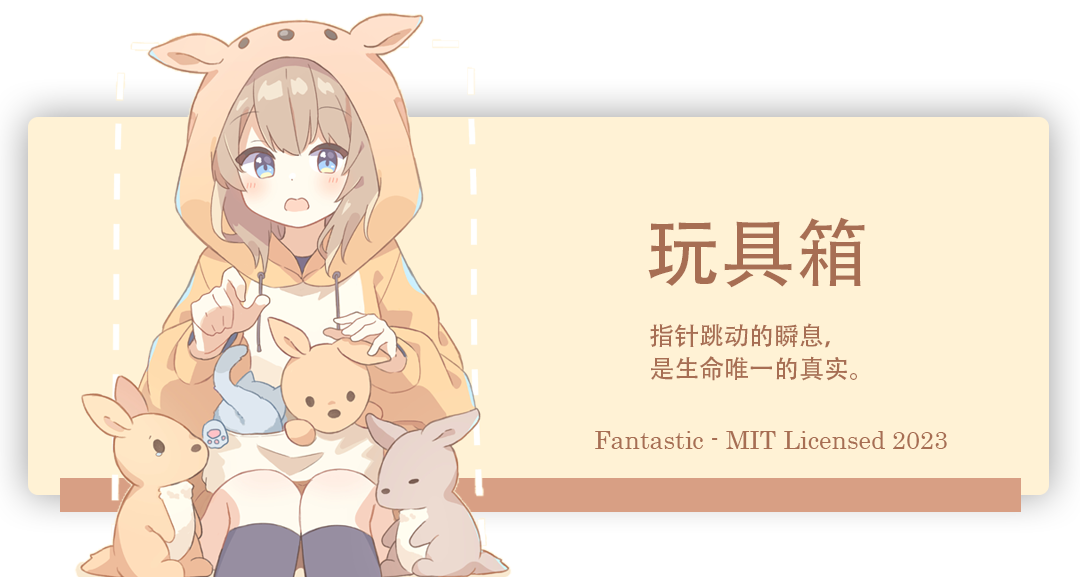
<style>
.page{position:relative;width:1080px;height:577px;background:#fff2d5}
.page>*{position:absolute;margin:0}
.t1{font:75px "AdobeHeitiStd-Regular";color:#a76e53}
.t2{font:25px/33.3px "AdobeHeitiStd-Regular";color:#a76e53}
.t3{font:25px "AdobeHeitiStd-Regular";color:#a76e53}
.t4{font:25px "Century";color:#a76e53}
</style>
<div class="page">
<p class="t1" style="left:648px;top:217px;width:217px;height:71px">玩具箱</p>
<p class="t2" style="left:650px;top:323px;width:207px;height:58px">指针跳动的瞬息，<br>是生命唯一的真实<span class="t3">。</span></p>
<p class="t4" style="left:595px;top:431px;width:352px;height:18px">Fantastic - MIT Licensed 2023</p>
</div>
